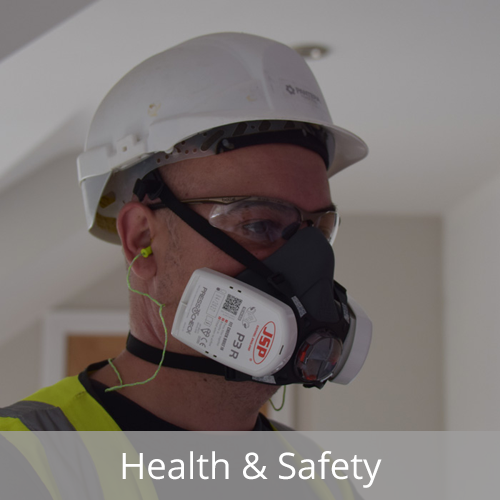
<style>
.page{position:relative;width:500px;height:500px}
.page>*{position:absolute;margin:0}
.t1{font:36.5px "OpenSans-Regular";color:#ffffff}
</style>
<div class="page">
<p class="t1" style="left:122px;top:451px;width:260px;height:37px">Health &amp; Safety</p>
</div>
